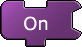
<style>
.page{position:relative;width:82px;height:47px;background:#ffffff}
.page>*{position:absolute;margin:0}
.t1{font:18px "Verdana";color:#ffffff}
</style>
<div class="page">
<p class="t1" style="left:24px;top:16px;width:24px;height:15px">On</p>
</div>
